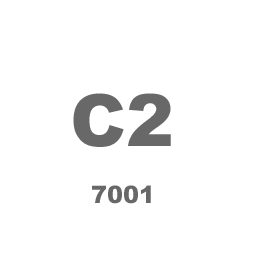
<style>
.page{position:relative;width:256px;height:256px;background:#ffffff}
.page>*{position:absolute;margin:0}
.t1{font:72px "Arial-Black";color:#696868}
.t2{font:24px "Arial-Black";color:#696868}
</style>
<div class="page">
<p class="t1" style="left:73px;top:93px;width:98px;height:54px">C2</p>
<p class="t2" style="left:92px;top:185px;width:59px;height:19px">7001</p>
</div>
